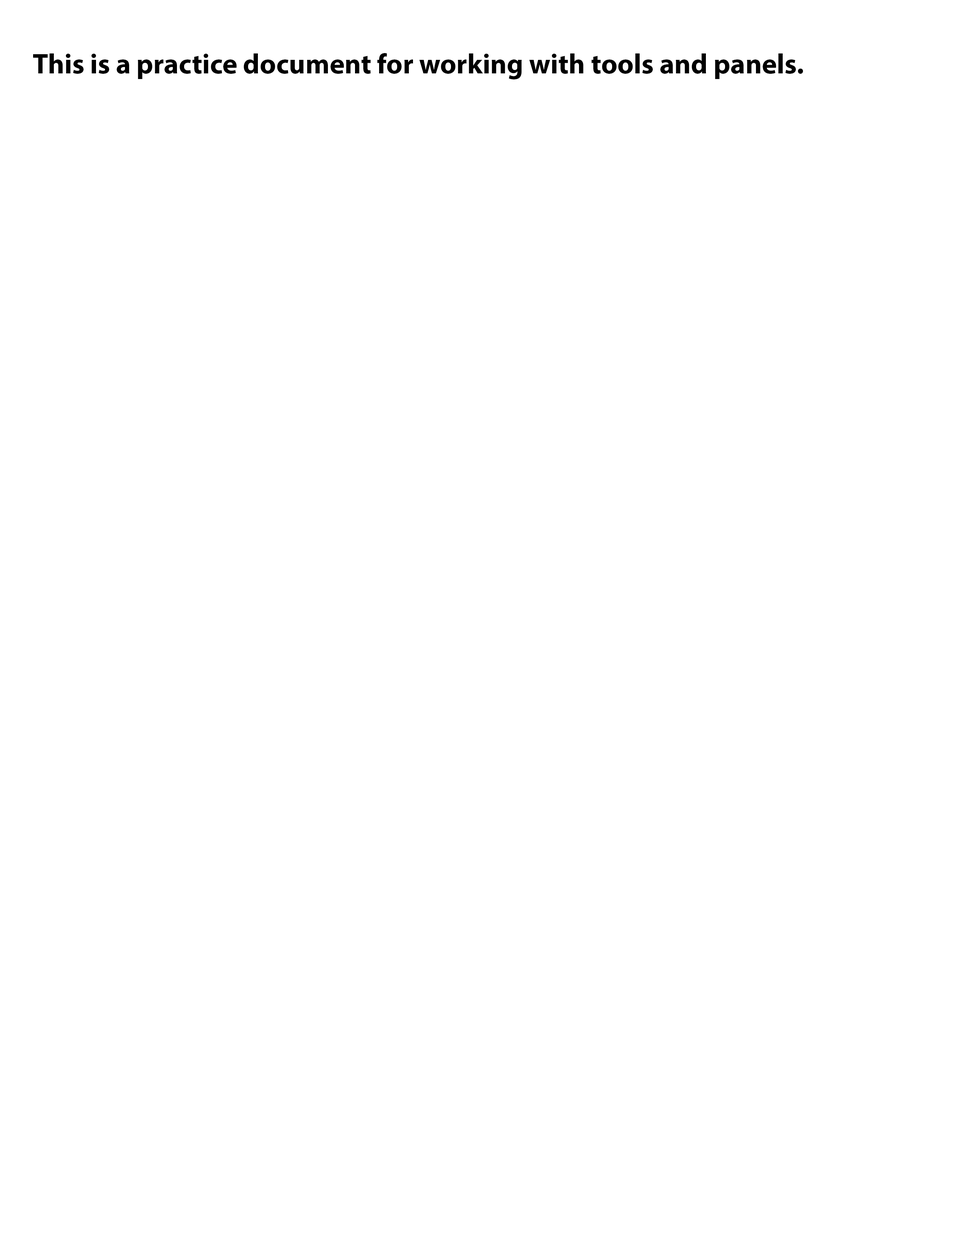
<style>
.page{position:relative;width:960px;height:1242px;background:#ffffff}
.page>*{position:absolute;margin:0}
.t1{font:28.2px "MyriadPro-Bold";color:#000000}
</style>
<div class="page">
<p class="t1" style="left:33px;top:53px;width:770px;height:26px">This is a practice document for working with tools and panels.</p>
</div>
